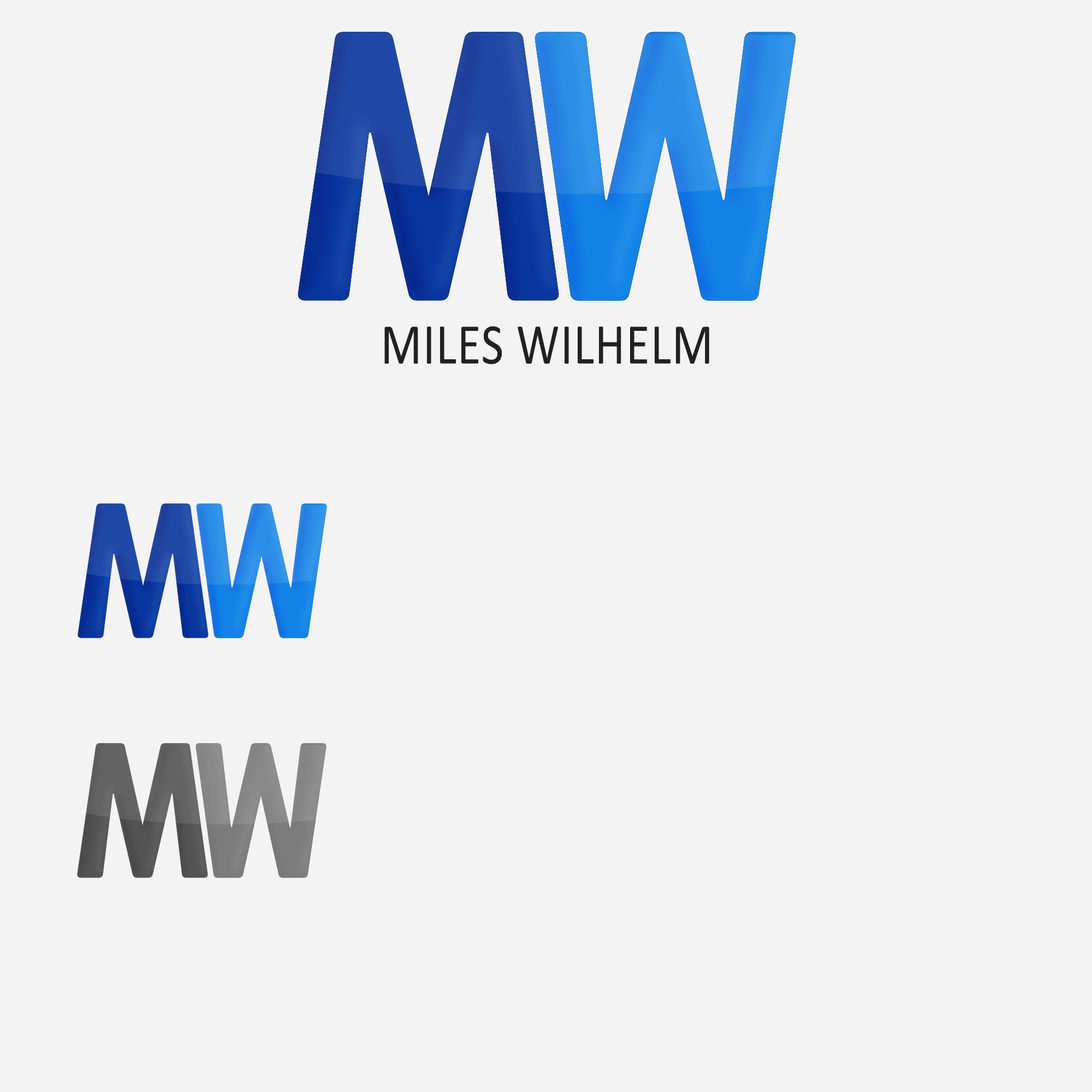
<style>
.page{position:relative;width:1092px;height:1092px;background:#f3f3f3}
.page>*{position:absolute;margin:0}
.t1{font:58px "Calibri";letter-spacing:0.02em;color:#212121;scale:0.83 1}
</style>
<div class="page">
<p class="t1" style="left:384px;top:326px;width:325px;height:38px">MILES WILHELM</p>
</div>
